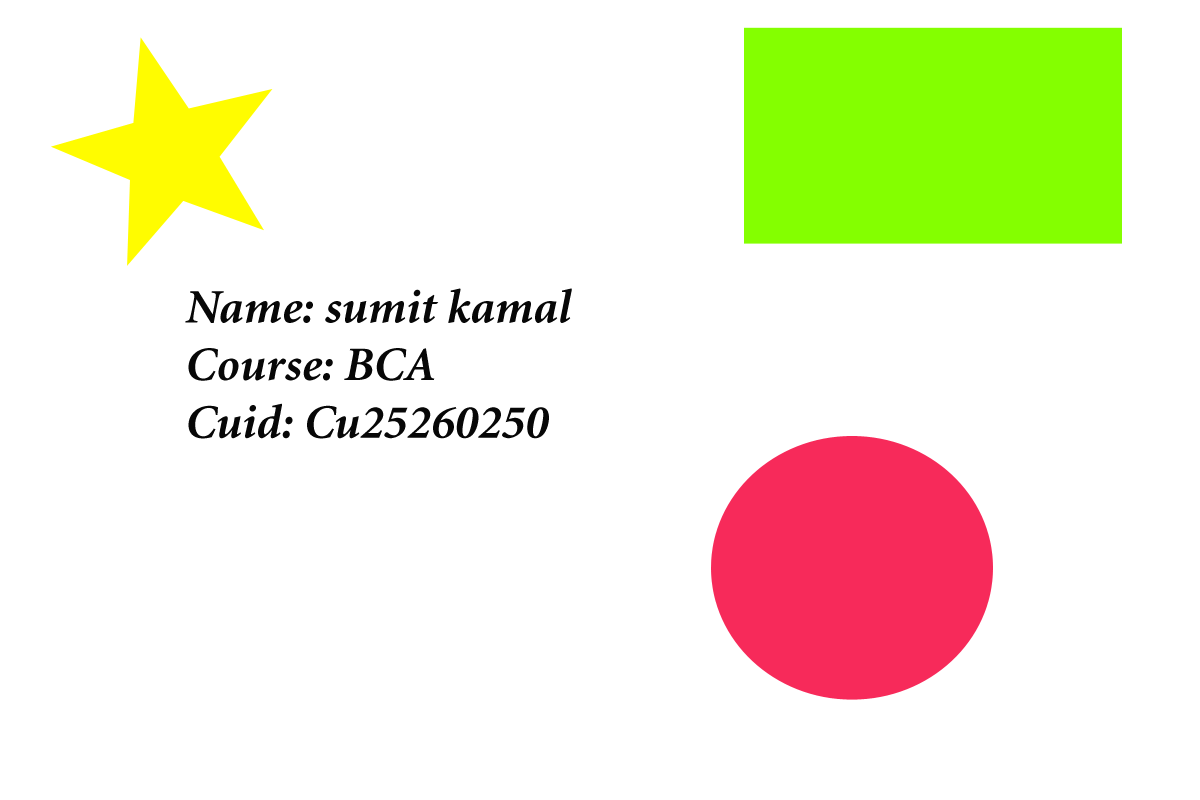
<style>
.page{position:relative;width:1200px;height:800px;background:#ffffff}
.page>*{position:absolute;margin:0}
.t1{font:48px "Minion-BoldItalic";color:#070707}
</style>
<div class="page">
<p class="t1" style="left:185px;top:288px;width:387px;height:151px">Name: sumit kamal<br>Course: BCA<br>Cuid: Cu25260250</p>
</div>
